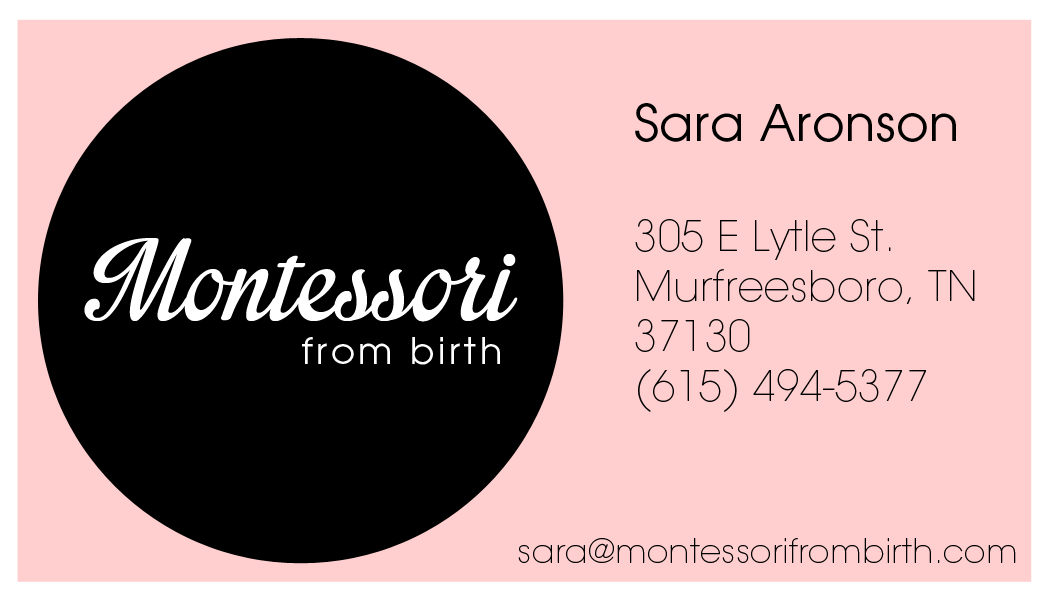
<style>
.page{position:relative;width:1050px;height:600px;background:#ffcfcf}
.page>*{position:absolute;margin:0}
.t1{font:41.7px "AvantGarde-ExtraLight";letter-spacing:0.01em;color:#000000}
.t2{font:50px "AvantGarde-Book";letter-spacing:0.01em;color:#000000}
.t3{font:158.3px "ImpregnablePersonalUseOnly";letter-spacing:0.01em;color:#ffffff}
.t4{font:36.5px "AvantGarde-Book";letter-spacing:0.1em;color:#fefefe}
.t5{font:33.3px "AvantGarde-ExtraLight";letter-spacing:0.01em;color:#000000}
</style>
<div class="page">
<p class="t1" style="left:635px;top:103px;width:340px;height:309px;text-align:justify"><span class="t2">Sara Aronson<br><br></span>305 E Lytle St.<br>Murfreesboro, TN<br>37130<br>(615) 494-5377</p>
<p class="t3" style="left:84px;top:238px;width:434px;height:84px">Montessori</p>
<p class="t4" style="left:302px;top:337px;width:198px;height:28px">from birth</p>
<p class="t5" style="left:518px;top:538px;width:498px;height:25px">sara@montessorifrombirth.com</p>
</div>
